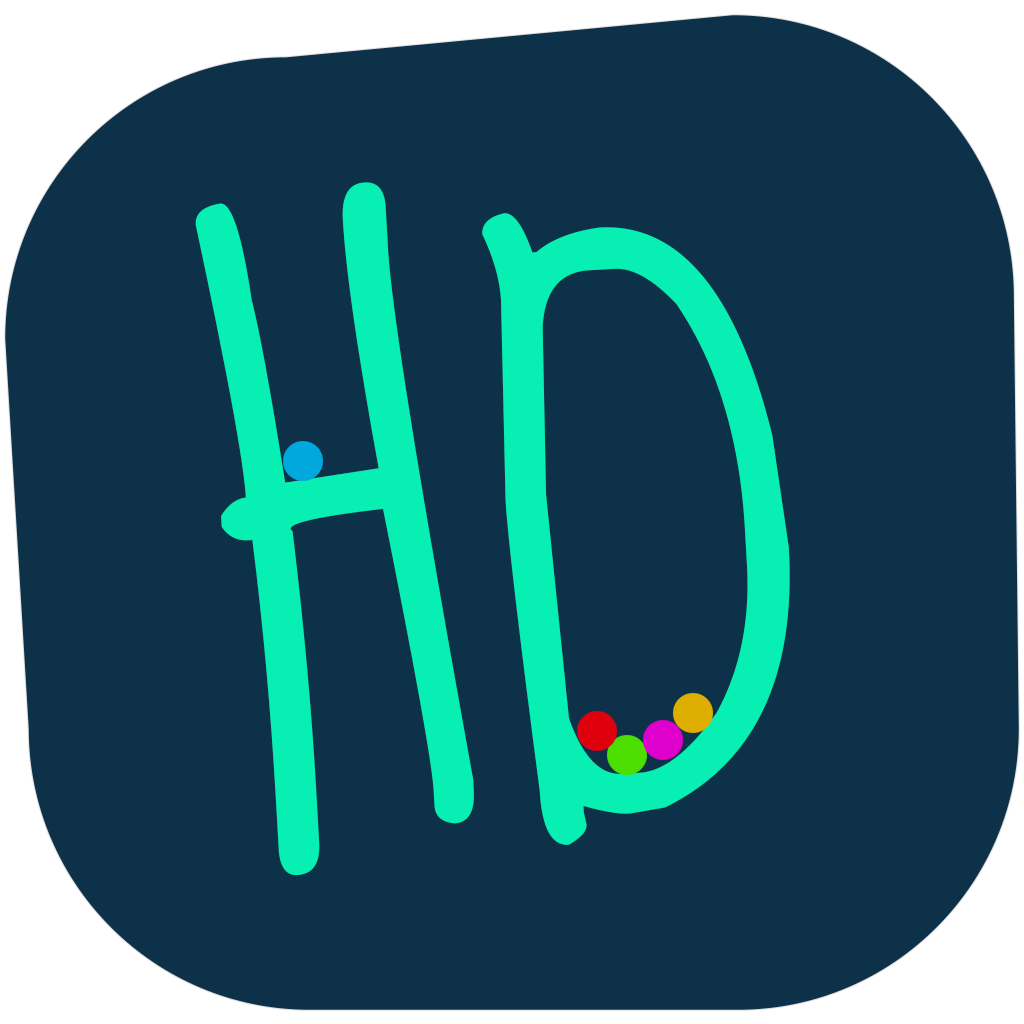
<style>
.page{position:relative;width:1024px;height:1024px;background:#0e314a}
.page>*{position:absolute;margin:0}
.t1{font:694.4px "SueEllenFrancisco";color:#07efb3}
</style>
<div class="page">
<p class="t1" style="left:195px;top:182px;width:595px;height:694px;rotate:-3deg">HD</p>
</div>
